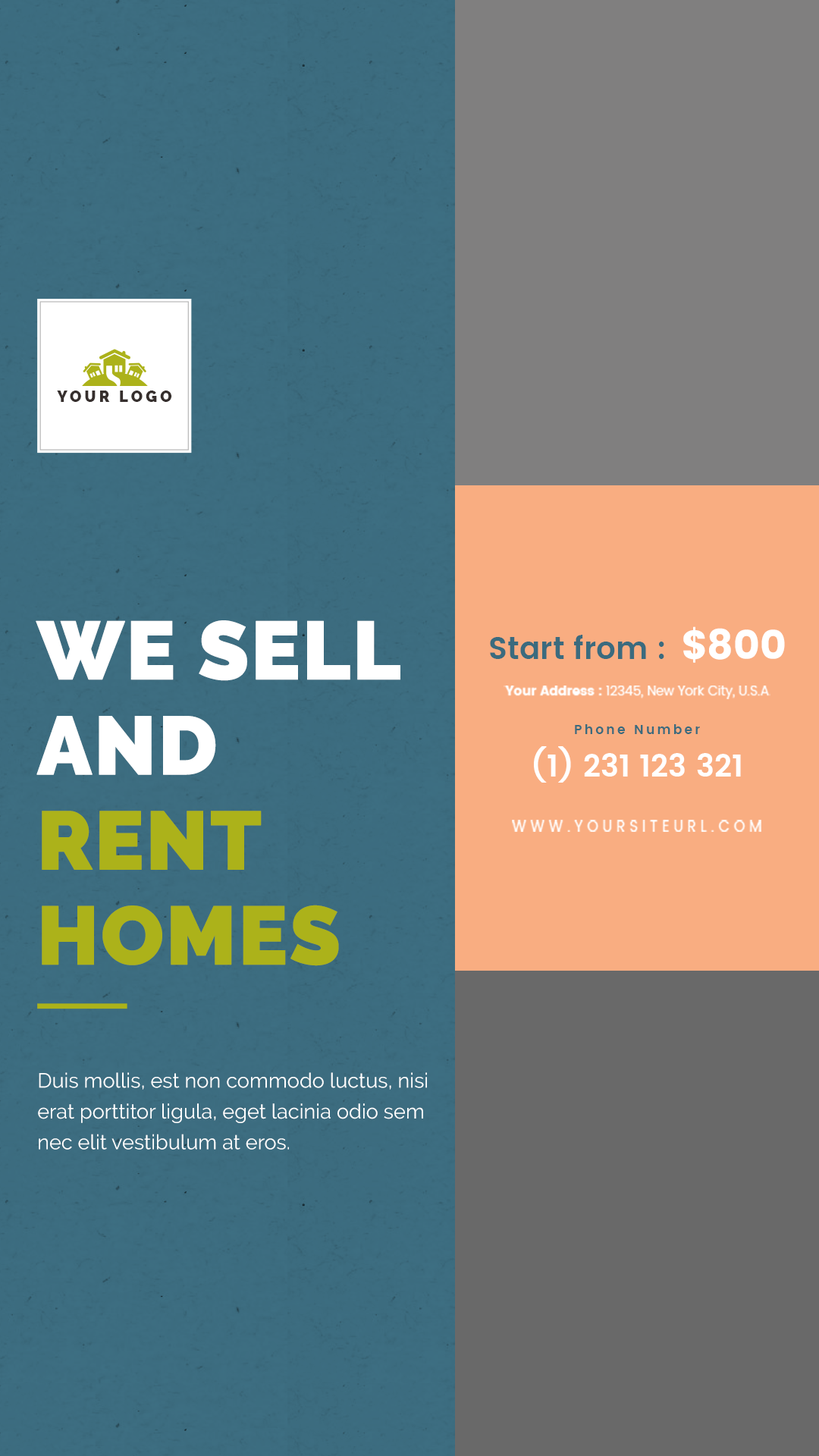
<style>
.page{position:relative;width:819px;height:1456px}
.page>*{position:absolute;margin:0}
.t1{font:15.4px "Raleway-Black";letter-spacing:0.2em;color:#362f2d;text-transform:uppercase}
.t2{font:82.2px/95px "Raleway-Black";color:#ffffff;text-transform:uppercase;font-weight:bold}
.t3{font:82.2px/95px "Raleway-Black";color:#acb21a;text-transform:uppercase;font-weight:bold}
.t4{font:30.5px "Poppins-SemiBold";color:#3b6b7e}
.t5{font:40.7px "Poppins";color:#ffffff}
.t6{font:12.7px "Poppins-Regular";color:#ffffff}
.t7{font:12.7px "Poppins";color:#ffffff}
.t8{font:30.5px/42.3px "Poppins-SemiBold";color:#ffffff}
.t9{font:12.7px/42.3px "Poppins-SemiBold";letter-spacing:0.2em;color:#3b6b7e}
.t10{font:14.3px "Poppins-Regular";letter-spacing:0.3em;color:#ffffff;text-transform:uppercase}
.t11{font:20.5px/30.8px "Raleway-Regular";color:#ffffff}
</style>
<div class="page">
<p class="t1" style="left:57px;top:391px;width:115px;height:11px">your logo</p>
<p class="t2" style="left:36px;top:620px;width:364px;height:346px">we sell and <br><span class="t3">rent homes</span></p>
<p class="t4" style="left:490px;top:626px;width:295px;height:37px">Start from : <span class="t5">$800</span></p>
<p class="t6" style="left:504px;top:686px;width:266px;height:13px"><span class="t7">Your Address :</span> 12345, New York City, U.S.A</p>
<p class="t8" style="left:534px;top:724px;width:207px;height:59px;text-align:center"><span class="t9">Phone Number<br></span>(1) 231 123 321</p>
<p class="t10" style="left:512px;top:820px;width:249px;height:12px">www.yoursiteurl.com</p>
<p class="t11" style="left:38px;top:1072px;width:389px;height:78px">Duis mollis, est non commodo luctus, nisi erat porttitor ligula, eget lacinia odio sem nec elit vestibulum at eros.</p>
</div>
